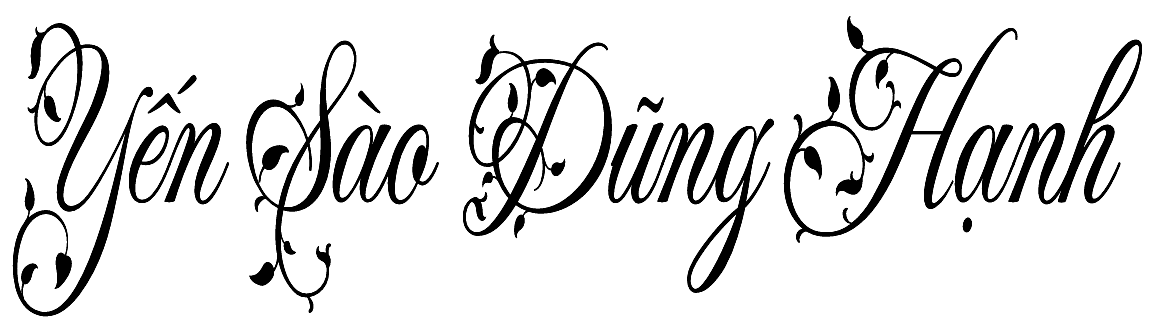
<style>
.page{position:relative;width:1175px;height:333px;background:#ffffff}
.page>*{position:absolute;margin:0}
.t1{font:235.8px "FleurDeLeah-Regular";color:#000000;scale:0.6 1}
</style>
<div class="page">
<p class="t1" style="left:12px;top:16px;width:1131px;height:301px">Yến Sào Dũng Hạnh</p>
</div>
